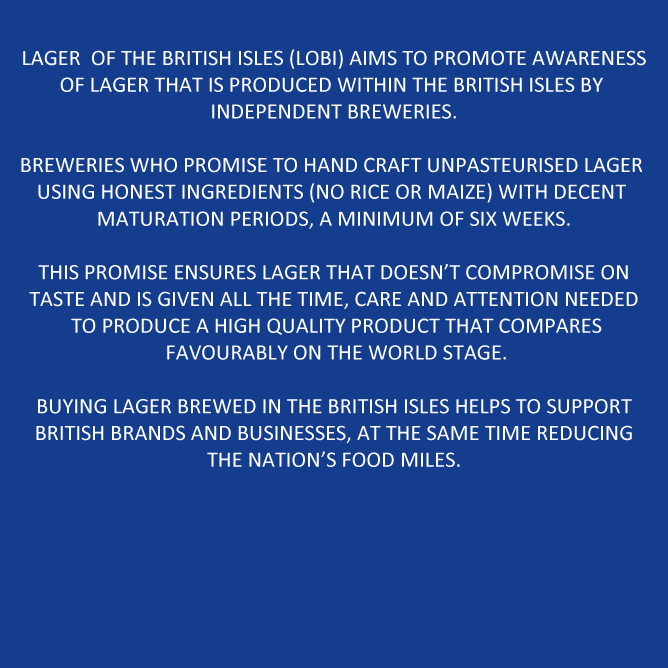
<style>
.page{position:relative;width:668px;height:668px;background:#143d8d}
.page>*{position:absolute;margin:0}
.t1{font:22.3px "Calibri";color:#ffffff}
</style>
<div class="page">
<p class="t1" style="left:21px;top:49px;width:625px;height:418px;text-align:center">LAGER  OF THE BRITISH ISLES (LOBI) AIMS TO PROMOTE AWARENESS<br>OF LAGER THAT IS PRODUCED WITHIN THE BRITISH ISLES BY <br>INDEPENDENT BREWERIES.<br><br>BREWERIES WHO PROMISE TO HAND CRAFT UNPASTEURISED LAGER <br>USING HONEST INGREDIENTS (NO RICE OR MAIZE) WITH DECENT <br>MATURATION PERIODS, A MINIMUM OF SIX WEEKS.<br><br>THIS PROMISE ENSURES LAGER THAT DOESN’T COMPROMISE ON<br>TASTE AND IS GIVEN ALL THE TIME, CARE AND ATTENTION NEEDED<br> TO PRODUCE A HIGH QUALITY PRODUCT THAT COMPARES<br> FAVOURABLY ON THE WORLD STAGE.<br><br>BUYING LAGER BREWED IN THE BRITISH ISLES HELPS TO SUPPORT<br>BRITISH BRANDS AND BUSINESSES, AT THE SAME TIME REDUCING<br>THE NATION’S FOOD MILES.</p>
</div>
